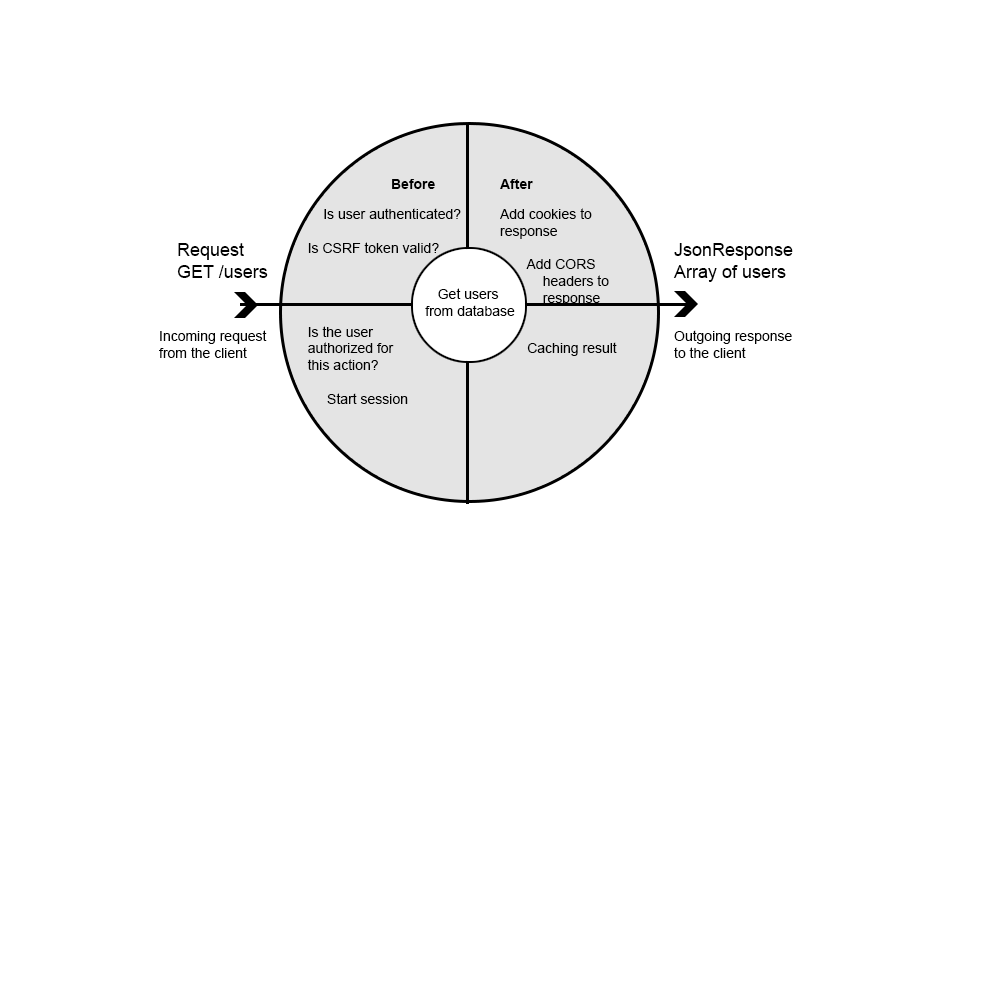
<style>
.page{position:relative;width:1000px;height:1000px;background:#ffffff}
.page>*{position:absolute;margin:0}
.t1{font:14px "Arial-BoldMT";color:#000000}
.t2{font:14px "ArialMT";color:#000000}
.t3{font:18px "ArialMT";color:#000000}
</style>
<div class="page">
<p class="t1" style="left:392px;top:179px;width:43px;height:10px">Before</p>
<p class="t1" style="left:500px;top:179px;width:33px;height:10px">After</p>
<p class="t2" style="left:307px;top:208px;width:154px;height:196px">Is user authenticated?<br>    <br>   Is CSRF token valid?<br><br><br><br><br>   Is the user <br>   authorized for <br>   this action?<br><br>        Start session</p>
<p class="t2" style="left:500px;top:208px;width:117px;height:148px">Add cookies to <br>response<br>  <br>       Add CORS <br>           headers to <br>           response<br><br><br>       Caching result</p>
<p class="t3" style="left:177px;top:243px;width:91px;height:35px">Request<br>GET /users</p>
<p class="t3" style="left:673px;top:243px;width:120px;height:39px">JsonResponse<br>Array of users</p>
<p class="t2" style="left:425px;top:288px;width:90px;height:28px;text-align:center">Get users <br>from database</p>
<p class="t2" style="left:159px;top:330px;width:108px;height:28px">Incoming request<br>from the client</p>
<p class="t2" style="left:674px;top:330px;width:118px;height:28px">Outgoing response<br>to the client</p>
</div>
